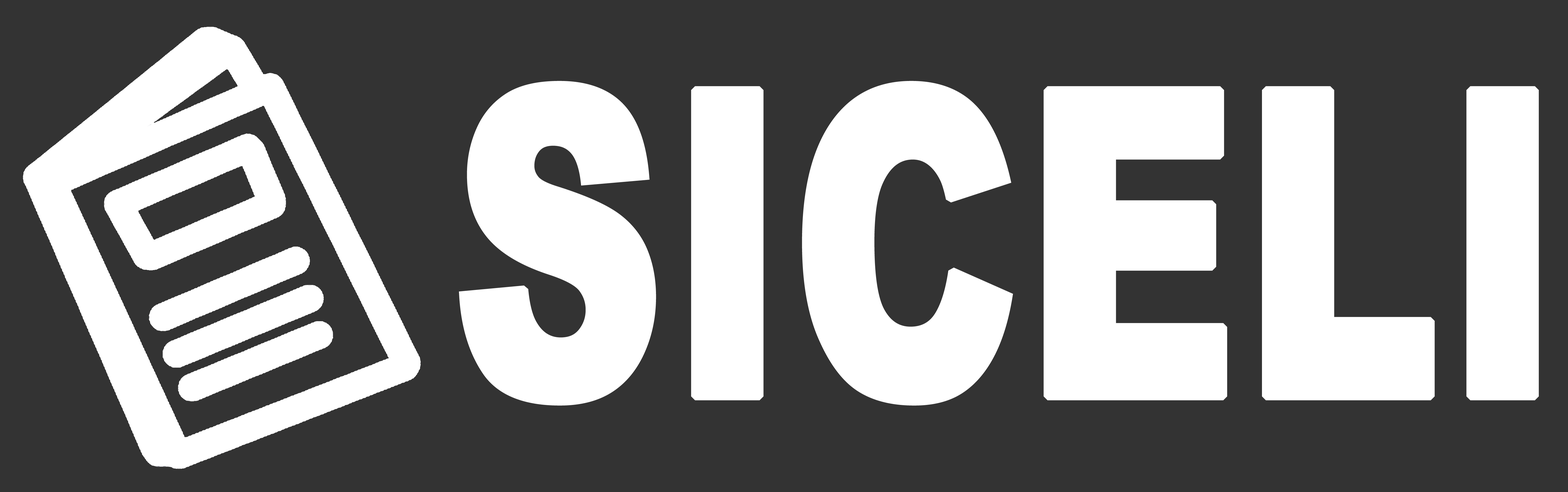
<style>
.page{position:relative;width:1568px;height:492px;background:#333333}
.page>*{position:absolute;margin:0}
.t1{font:427.5px "Arial-Black";color:#ffffff;font-weight:bold;scale:0.68 1}
</style>
<div class="page">
<p class="t1" style="left:459px;top:81px;width:1080px;height:324px">SICELI</p>
</div>
